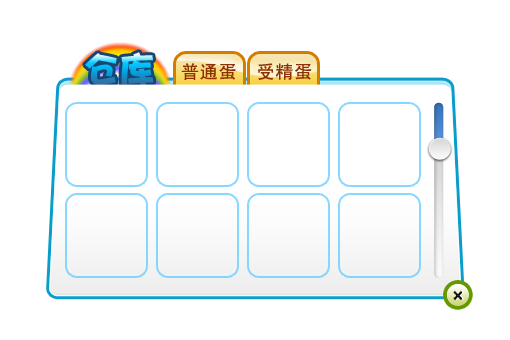
<style>
.page{position:relative;width:510px;height:340px;background:#ffffff}
.page>*{position:absolute;margin:0}
.t1{font:36px "DFPHaiBaoW12"}
.t2{font:18px "SimHei";letter-spacing:0.04em;color:#8f3001}
</style>
<div class="page">
<p class="t1" style="left:85px;top:52px;width:69px;height:34px">仓库</p>
<p class="t2" style="left:181px;top:63px;width:131px;height:17px">普通蛋  受精蛋</p>
</div>
